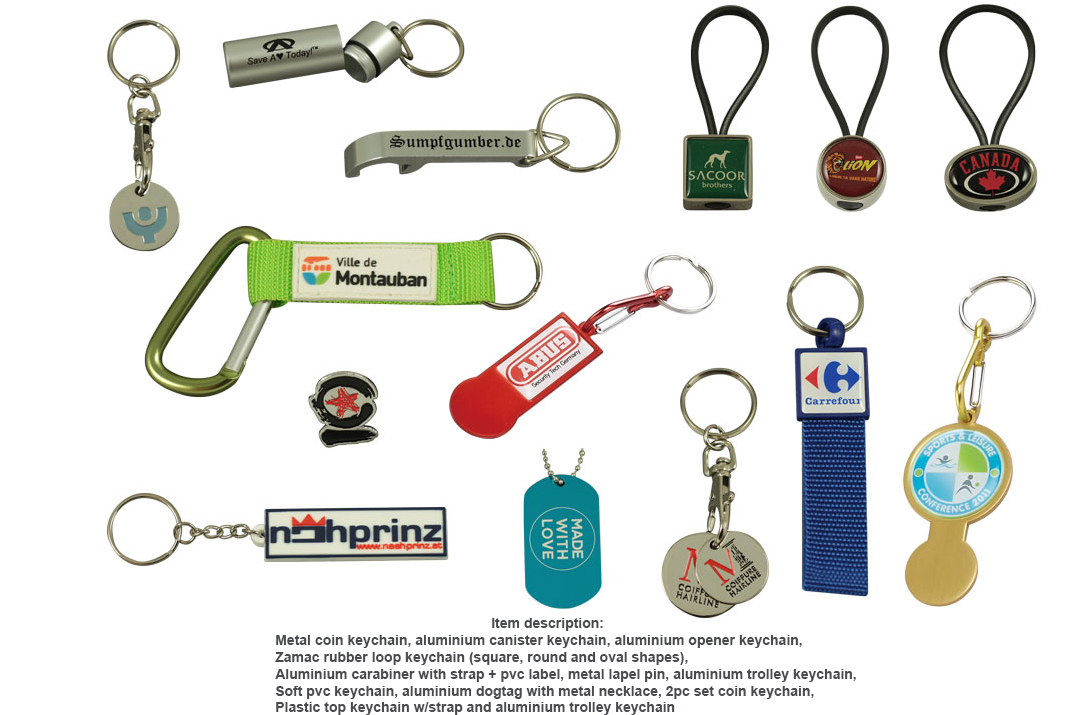
<style>
.page{position:relative;width:1073px;height:715px;background:#ffffff}
.page>*{position:absolute;margin:0}
.t1{font:14px "Arial-BoldMT";color:#484a4b}
.t2{font:12px "Arial-Black";color:#484a4b}
</style>
<div class="page">
<p class="t1" style="left:275px;top:618px;width:581px;height:97px"><span class="t2">      </span>Item description:<br>Metal coin keychain, aluminium canister keychain, aluminium opener keychain,<br>Zamac rubber loop keychain (square, round and oval shapes),<br>Aluminium carabiner with strap + pvc label, metal lapel pin, aluminium trolley keychain,<br>Soft pvc keychain, aluminium dogtag with metal necklace, 2pc set coin keychain,<br>Plastic top keychain w/strap and aluminium trolley keychain</p>
</div>
